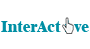
<style>
.page{position:relative;width:90px;height:49px;background:#ffffff}
.page>*{position:absolute;margin:0}
.t1{font:7.6px "Dutch801BT-ExtraBold";color:#008fa4}
</style>
<div class="page">
<p class="t1" style="left:1px;top:20px;width:88px;height:12px">InterAct i ve</p>
</div>
